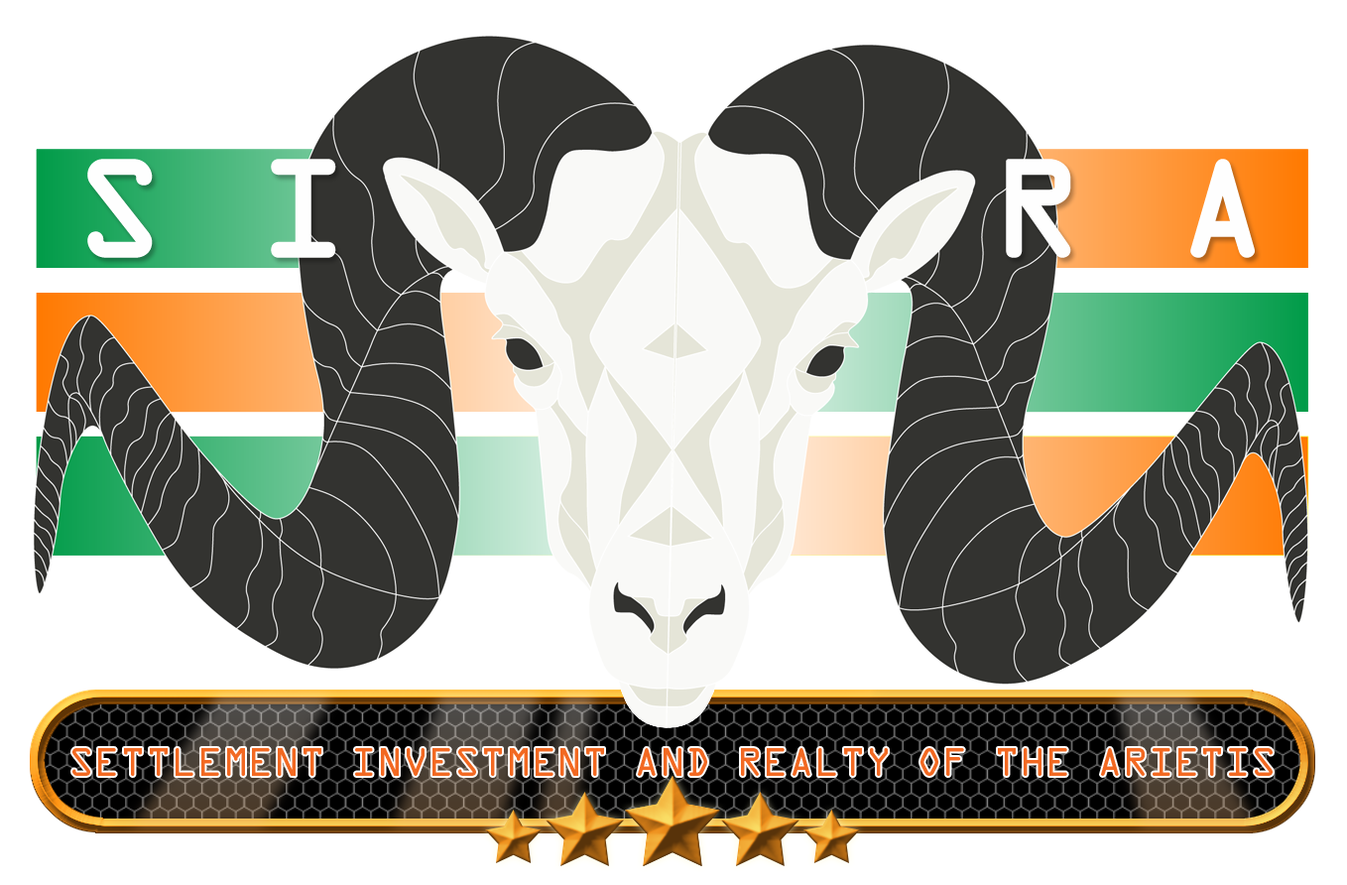
<style>
.page{position:relative;width:1347px;height:885px;background:#ffffff}
.page>*{position:absolute;margin:0}
.t1{font:123px "OCRAStd";color:#fefefe;font-weight:bold}
.t2{font:35.7px "OCRAStd";color:#f26922}
</style>
<div class="page">
<p class="t1" style="left:87px;top:159px;width:1168px;height:99px">S I       R A</p>
<p class="t2" style="left:72px;top:748px;width:1201px;height:28px">SETTLEMENT INVESTMENT AND REALTY OF THE ARIETIS</p>
</div>
